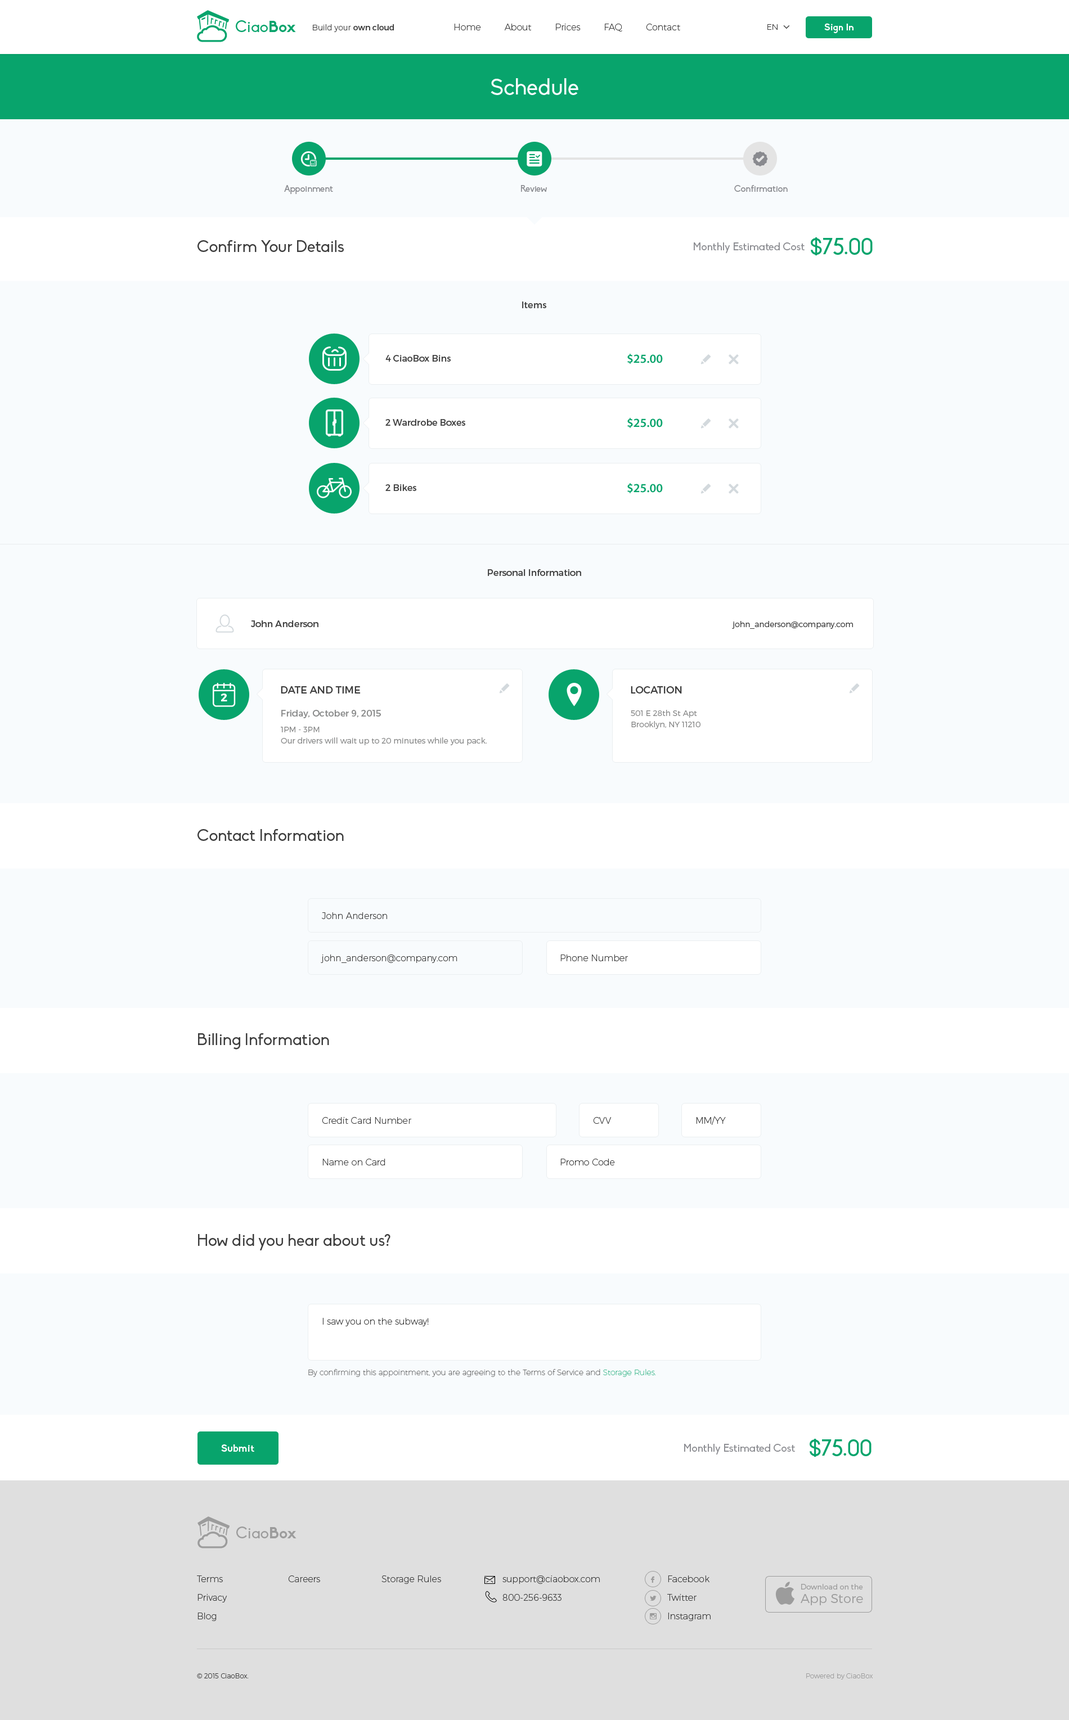
<style>
.page{position:relative;width:1069px;height:1720px;background:#f8fbfd}
.page>*{position:absolute;margin:0}
.t1{font:15.8px "Biko";color:#08a46c}
.t2{font:15.8px "Biko-Bold";color:#08a46c}
.t3{font:7.9px "Montserrat-UltraLight";color:#3d3d3d}
.t4{font:7.9px "Montserrat-Regular";color:#3d3d3d}
.t5{font:9px "Montserrat-UltraLight";color:#3d3d3d}
.t6{font:9.6px "Biko-Bold";color:#ffffff}
.t7{font:22.5px "Biko";color:#f8fbfd}
.t8{font:9px "Biko";color:#898a8f}
.t9{font:16.3px "Biko";color:#3d3d3d}
.t10{font:10.7px "Biko";color:#898a8f}
.t11{font:22.5px "Biko";color:#08a46c}
.t12{font:9px "Montserrat-Regular";color:#3d3d3d}
.t13{font:12.4px "MyriadPro-Semibold";color:#08a46c}
.t14{font:7.9px "Montserrat-Light";color:#3d3d3d}
.t15{font:10.1px "Montserrat-Regular";color:#3d3d3d;text-transform:uppercase}
.t16{font:11.2px "Montserrat-Bold";color:#ffffff}
.t17{font:7.9px/11.2px "Montserrat-Light";color:#878888}
.t18{font:9px/13.5px "Montserrat-Regular";color:#878888}
.t19{font:7.9px/15.8px "Montserrat-Light";color:#878888}
.t20{font:7.9px/11.2px "Montserrat-Light";color:#878888;text-transform:uppercase}
.t21{font:7.9px "Montserrat-Hairline";color:#3d3d3d}
.t22{font:7.9px "Montserrat-Hairline";color:#08a46c}
.t23{font:10.1px "Biko-Bold";color:#ffffff}
.t24{font:15.8px "Biko";color:#9c9c9c}
.t25{font:15.8px "Biko-Bold";color:#9c9c9c}
.t26{font:9px/18.6px "Montserrat-UltraLight";color:#3d3d3d}
.t27{font:10.7px "Socialico";color:#9c9c9c;text-transform:uppercase}
.t28{font:7.3px/18.6px "Montserrat-Light";color:#9c9c9c}
.t29{font:12.8px/13.5px "Montserrat-Light";color:#9c9c9c}
.t30{font:6.8px "font2985";color:#9c9c9c}
.t31{font:6.8px "Montserrat-UltraLight";color:#3d3d3d}
.t32{font:6.8px "Montserrat-UltraLight";color:#9c9c9c}
</style>
<div class="page">
<p class="t1" style="left:236px;top:20px;width:60px;height:12px">Ciao<span class="t2">Box</span></p>
<p class="t3" style="left:313px;top:24px;width:81px;height:8px">Build your <span class="t4">own cloud</span></p>
<p class="t5" style="left:454px;top:24px;width:226px;height:8px">Home         About         Prices         FAQ         Contact</p>
<p class="t3" style="left:767px;top:24px;width:10px;height:6px">EN</p>
<p class="t6" style="left:824px;top:23px;width:29px;height:10px">Sign In</p>
<p class="t7" style="left:490px;top:78px;width:88px;height:17px">Schedule</p>
<p class="t8" style="left:284px;top:185px;width:49px;height:9px">Appoinment</p>
<p class="t8" style="left:521px;top:185px;width:26px;height:7px">Review</p>
<p class="t8" style="left:734px;top:185px;width:54px;height:7px">Confirmation</p>
<p class="t9" style="left:197px;top:240px;width:147px;height:12px">Confirm Your Details</p>
<p class="t10" style="left:694px;top:242px;width:110px;height:11px">Monthly Estimated Cost</p>
<p class="t11" style="left:811px;top:237px;width:61px;height:18px">$75.00</p>
<p class="t12" style="left:522px;top:302px;width:24px;height:6px">Items</p>
<p class="t13" style="left:627px;top:354px;width:36px;height:10px">$25.00</p>
<p class="t12" style="left:385px;top:355px;width:66px;height:7px">4 CiaoBox Bins</p>
<p class="t12" style="left:385px;top:419px;width:80px;height:7px">2 Wardrobe Boxes</p>
<p class="t13" style="left:627px;top:418px;width:36px;height:10px">$25.00</p>
<p class="t12" style="left:385px;top:484px;width:31px;height:7px">2 Bikes</p>
<p class="t13" style="left:627px;top:483px;width:36px;height:10px">$25.00</p>
<p class="t12" style="left:488px;top:569px;width:93px;height:7px">Personal Information</p>
<p class="t12" style="left:251px;top:620px;width:67px;height:7px">John Anderson</p>
<p class="t14" style="left:732px;top:621px;width:121px;height:8px">john_anderson@company.com</p>
<p class="t15" style="left:281px;top:686px;width:80px;height:8px">Date and time</p>
<p class="t15" style="left:631px;top:686px;width:51px;height:8px">Location</p>
<p class="t16" style="left:220px;top:694px;width:7px;height:7px">2</p>
<p class="t17" style="left:281px;top:710px;width:206px;height:35px"><span class="t18">Friday, October 9, 2015<br></span><span class="t19">1PM - 3PM<br></span>Our drivers will wait up to 20 minutes while you pack<span class="t20">.</span></p>
<p class="t17" style="left:631px;top:710px;width:69px;height:19px">501 E 28th St Apt<br>Brooklyn, NY 11210</p>
<p class="t9" style="left:197px;top:829px;width:147px;height:12px">Contact Information</p>
<p class="t5" style="left:322px;top:912px;width:65px;height:7px">John Anderson</p>
<p class="t5" style="left:321px;top:955px;width:136px;height:8px">john_anderson@company.com</p>
<p class="t5" style="left:560px;top:955px;width:68px;height:6px">Phone Number</p>
<p class="t9" style="left:198px;top:1033px;width:131px;height:17px">Billing Information</p>
<p class="t5" style="left:322px;top:1117px;width:89px;height:7px">Credit Card Number</p>
<p class="t5" style="left:593px;top:1117px;width:18px;height:7px">CVV</p>
<p class="t5" style="left:696px;top:1116px;width:30px;height:9px">MM/YY</p>
<p class="t5" style="left:322px;top:1159px;width:63px;height:7px">Name on Card</p>
<p class="t5" style="left:560px;top:1159px;width:55px;height:7px">Promo Code</p>
<p class="t9" style="left:198px;top:1234px;width:192px;height:16px">How did you hear about us?</p>
<p class="t5" style="left:322px;top:1318px;width:107px;height:8px">I saw you on the subway!</p>
<p class="t21" style="left:308px;top:1369px;width:348px;height:8px">By confirming this appointment, you are agreeing to the Terms of Service and <span class="t22">Storage Rules.</span></p>
<p class="t23" style="left:221px;top:1444px;width:33px;height:8px">Submit</p>
<p class="t10" style="left:684px;top:1444px;width:111px;height:11px">Monthly Estimated Cost</p>
<p class="t11" style="left:809px;top:1439px;width:62px;height:18px">$75.00</p>
<p class="t24" style="left:236px;top:1527px;width:60px;height:11px">Ciao<span class="t25">Box</span></p>
<p class="t26" style="left:197px;top:1576px;width:30px;height:45px">Terms<br>Privacy<br>Blog</p>
<p class="t5" style="left:288px;top:1576px;width:32px;height:6px">Careers</p>
<p class="t5" style="left:381px;top:1576px;width:60px;height:8px">Storage Rules</p>
<p class="t26" style="left:502px;top:1576px;width:98px;height:25px">support@ciaobox.com<br>800-256-9633</p>
<p class="t27" style="left:650px;top:1576px;width:4px;height:7px">F</p>
<p class="t26" style="left:667px;top:1576px;width:43px;height:45px">Facebook<br>Twitter<br>Instagram</p>
<p class="t28" style="left:800px;top:1584px;width:63px;height:21px">Download on the<br><span class="t29">App Store</span></p>
<p class="t27" style="left:650px;top:1596px;width:6px;height:5px">L</p>
<p class="t30" style="left:650px;top:1613px;width:6px;height:6px">x</p>
<p class="t31" style="left:197px;top:1673px;width:52px;height:5px">© 2015 CiaoBox.</p>
<p class="t32" style="left:806px;top:1673px;width:66px;height:7px">Powered by CiaoBox</p>
</div>
